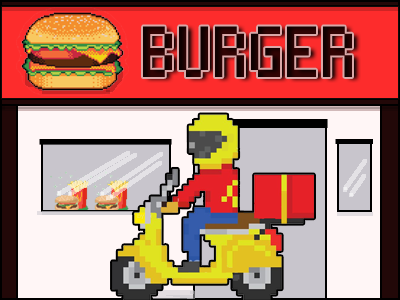
<style>
.page{position:relative;width:400px;height:300px;background:#fff6f6}
.page>*{position:absolute;margin:0}
.t1{font:72px "PixelMplus10-Regular";color:#1e0202}
</style>
<div class="page">
<p class="t1" style="left:143px;top:26px;width:209px;height:51px">BURGER</p>
</div>
